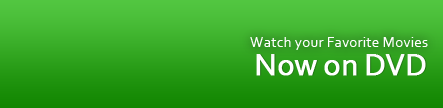
<style>
.page{position:relative;width:443px;height:108px}
.page>*{position:absolute;margin:0}
.t1{font:15.5px "Corbel";color:#ffffff}
.t2{font:32.1px "Corbel";letter-spacing:-0.025em;color:#ffffff;font-weight:bold}
</style>
<div class="page">
<p class="t1" style="left:250px;top:37px;width:178px;height:13px">Watch your Favorite Movies</p>
<p class="t2" style="left:256px;top:54px;width:170px;height:22px">Now on DVD</p>
</div>
